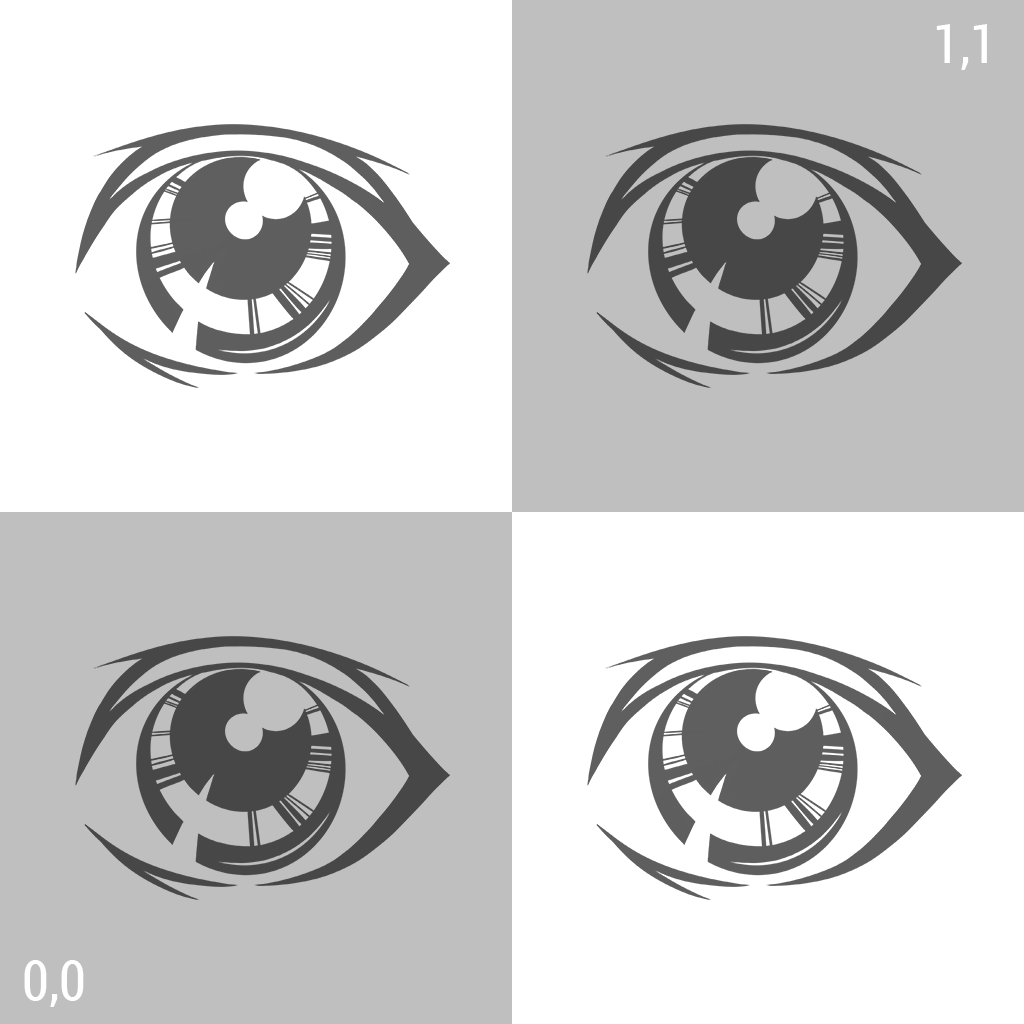
<style>
.page{position:relative;width:1024px;height:1024px;background:#ffffff}
.page>*{position:absolute;margin:0}
.t1{font:54.7px "RobotoCondensed-Regular";color:#ffffff}
</style>
<div class="page">
<p class="t1" style="left:936px;top:24px;width:51px;height:46px">1,1</p>
<p class="t1" style="left:24px;top:960px;width:60px;height:47px">0,0</p>
</div>
